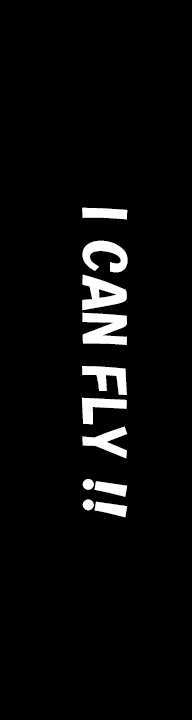
<style>
.page{position:relative;width:192px;height:720px;background:#000000}
.page>*{position:absolute;margin:0}
.t1{font:55px/65px "HGPSoeiKakupoptai";color:#ffffff}
</style>
<div class="page">
<p class="t1" style="left:81px;top:207px;width:47px;height:311px;text-align:center">I CAN FLY !!</p>
</div>
